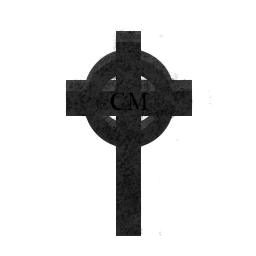
<style>
.page{position:relative;width:256px;height:256px;background:#ffffff}
.page>*{position:absolute;margin:0}
.t1{font:25px "MS Serif";color:#000000}
</style>
<div class="page">
<p class="t1" style="left:110px;top:92px;width:38px;height:18px">CM</p>
</div>
